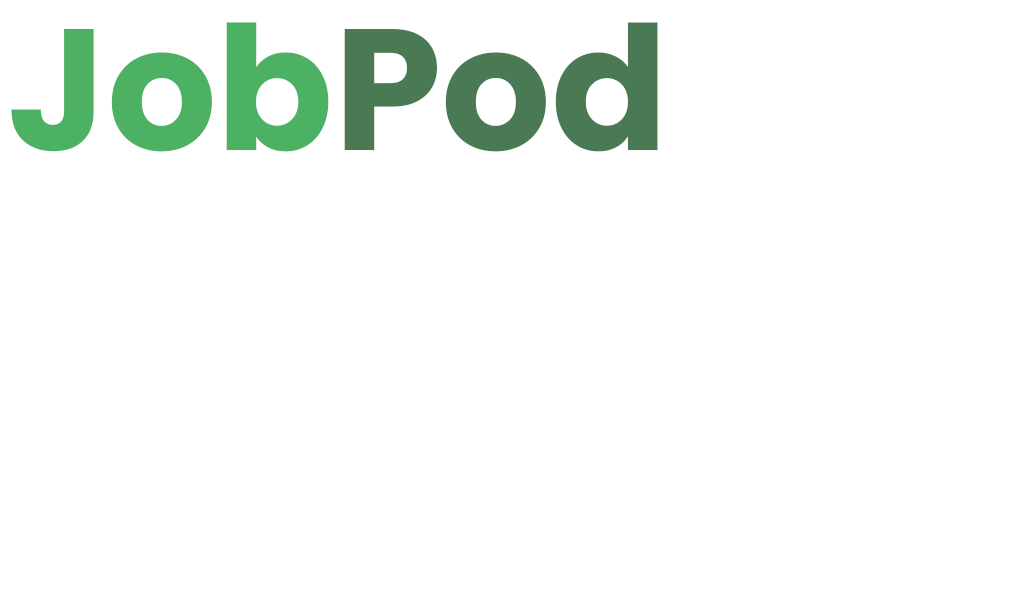
<style>
.page{position:relative;width:1029px;height:597px;background:#ffffff}
.page>*{position:absolute;margin:0}
.t1{font:172.3px "Poppins-Bold";color:#4db163}
.t2{font:172.3px "Poppins-Bold";color:#497a54}
</style>
<div class="page">
<p class="t1" style="left:11px;top:22px;width:647px;height:130px">Job<span class="t2">Pod</span></p>
</div>
